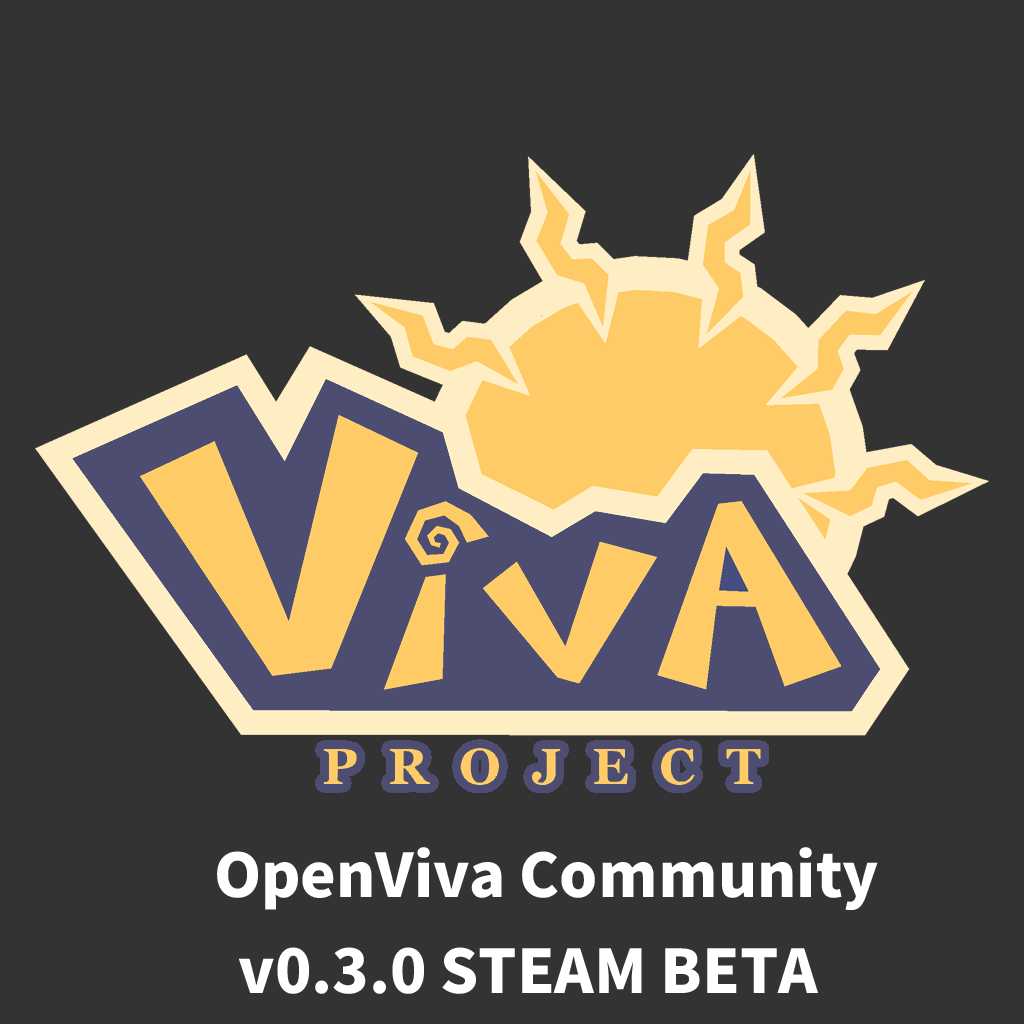
<style>
.page{position:relative;width:1024px;height:1024px;background:#333333}
.page>*{position:absolute;margin:0}
.t1{font:60px/96px "Keifont";color:#ffffff}
</style>
<div class="page">
<p class="t1" style="left:217px;top:847px;width:661px;height:147px;text-align:center">OpenViva Community<br>v0.3.0 STEAM BETA</p>
</div>
